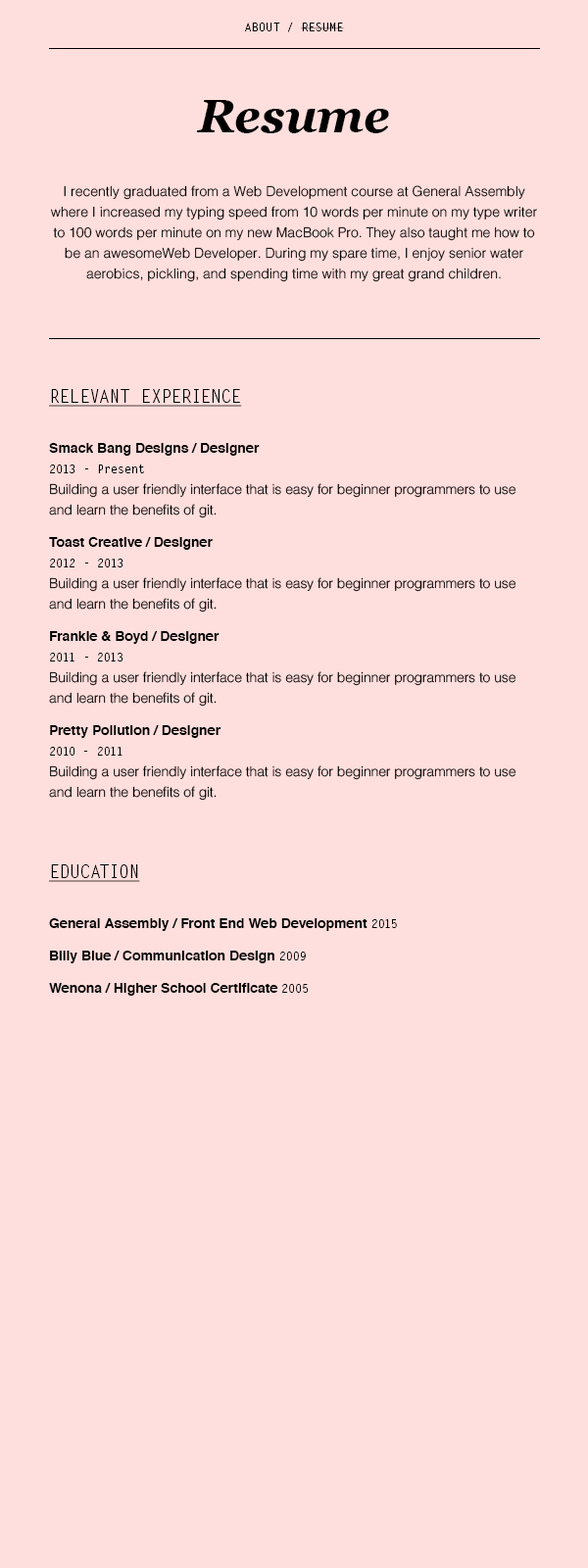
<style>
.page{position:relative;width:588px;height:1568px;background:#ffdfdd}
.page>*{position:absolute;margin:0}
.t1{font:11.8px "LetterGothicStd";color:#000000}
.t2{font:47px "Georgia-BoldItalic";color:#000000}
.t3{font:13.7px/20.6px "Helvetica-Light";color:#000000}
.t4{font:17.6px "LetterGothicStd";color:#000000;text-transform:uppercase;text-decoration:underline}
.t5{font:13.7px/20.6px "Helvetica-Bold";color:#000000}
.t6{font:11.8px/20.6px "LetterGothicStd";color:#000000}
</style>
<div class="page">
<p class="t1" style="left:245px;top:23px;width:99px;height:9px">ABOUT / RESUME</p>
<p class="t2" style="left:196px;top:100px;width:193px;height:33px">Resume</p>
<p class="t3" style="left:51px;top:185px;width:486px;height:97px;text-align:center">I recently graduated from a Web Development course at General Assembly where I increased my typing speed from 10 words per minute on my type writer to 100 words per minute on my new MacBook Pro. They also taught me how to be an awesomeWeb Developer. During my spare time, I enjoy senior water aerobics, pickling, and spending time with my great grand children.</p>
<p class="t4" style="left:49px;top:389px;width:193px;height:18px">Relevant Experience</p>
<p class="t3" style="left:49px;top:443px;width:467px;height:358px"><span class="t5">Smack Bang Designs / Designer<br></span><span class="t6">2013 - Present<br></span>Building a user friendly interface that is easy for beginner programmers to use and learn the benefits of git.<br><span class="t5">Toast Creative / Designer<br></span><span class="t6">2012 - 2013<br></span>Building a user friendly interface that is easy for beginner programmers to use and learn the benefits of git.<br><span class="t5">Frankie &amp; Boyd / Designer <br></span><span class="t6">2011 - 2013<br></span>Building a user friendly interface that is easy for beginner programmers to use and learn the benefits of git.<br><span class="t5">Pretty Pollution / Designer <br></span><span class="t6">2010 - 2011<br></span>Building a user friendly interface that is easy for beginner programmers to use and learn the benefits of git.</p>
<p class="t4" style="left:49px;top:864px;width:91px;height:18px">EDUCATION</p>
<p class="t5" style="left:49px;top:918px;width:348px;height:78px">General Assembly / Front End Web Development <span class="t6">2015<br></span>Billy Blue / Communication Design <span class="t6">2009<br></span>Wenona / Higher School Certificate <span class="t6">2005</span></p>
</div>
